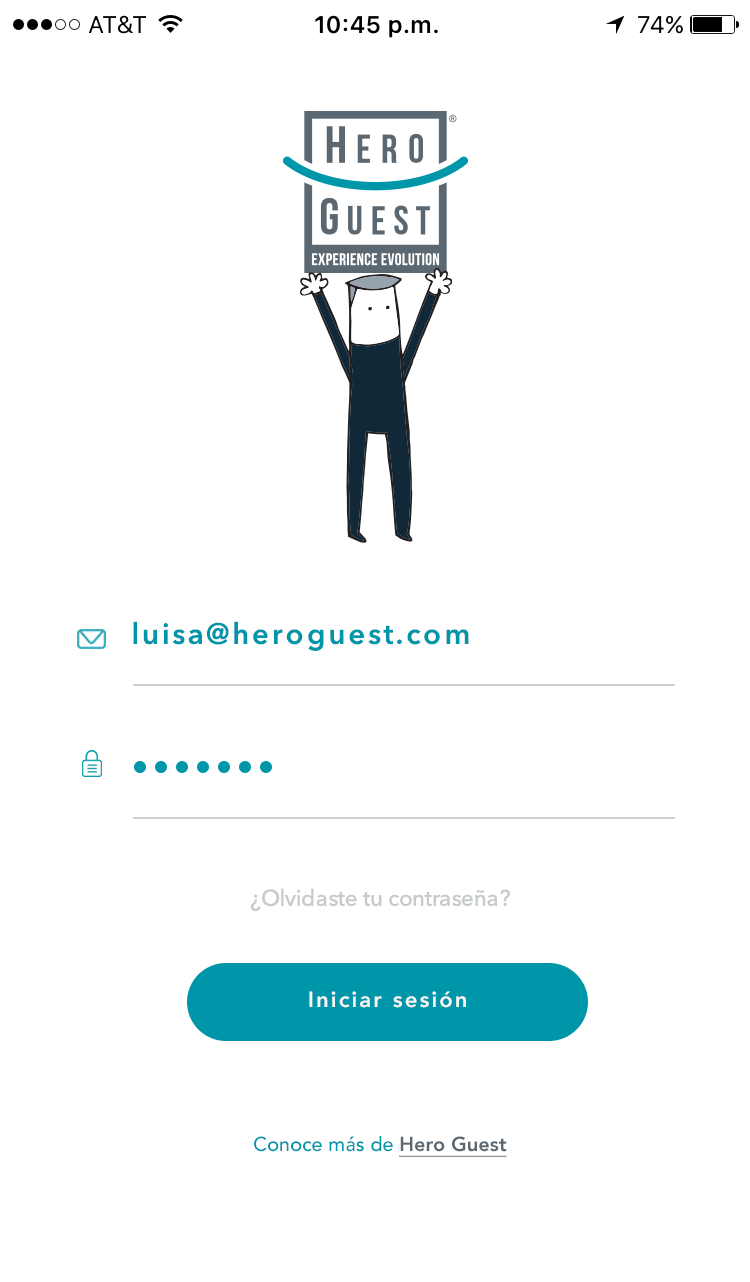
<style>
.page{position:relative;width:750px;height:1282px;background:#ffffff}
.page>*{position:absolute;margin:0}
.t1{font:29.1px "AvenirNext-DemiBold";letter-spacing:0.1em;color:#0096a9}
.t2{font:22.5px "AvenirNext-Medium";letter-spacing:-0.015em;color:#c7cbce}
.t3{font:21.8px "Avenir-Heavy";letter-spacing:0.1em;color:#f6f6f6}
.t4{font:20.1px "Avenir-Medium";color:#0096a9}
.t5{font:20.1px "Avenir-Heavy";color:#5c6871;text-decoration:underline}
</style>
<div class="page">
<p class="t1" style="left:133px;top:621px;width:336px;height:30px">luisa@heroguest.com</p>
<p class="t2" style="left:250px;top:888px;width:260px;height:24px">¿Olvidaste tu contraseña?</p>
<p class="t3" style="left:309px;top:991px;width:157px;height:17px">Iniciar sesión</p>
<p class="t4" style="left:254px;top:1136px;width:253px;height:21px">Conoce más de <span class="t5">Hero Guest</span></p>
</div>
